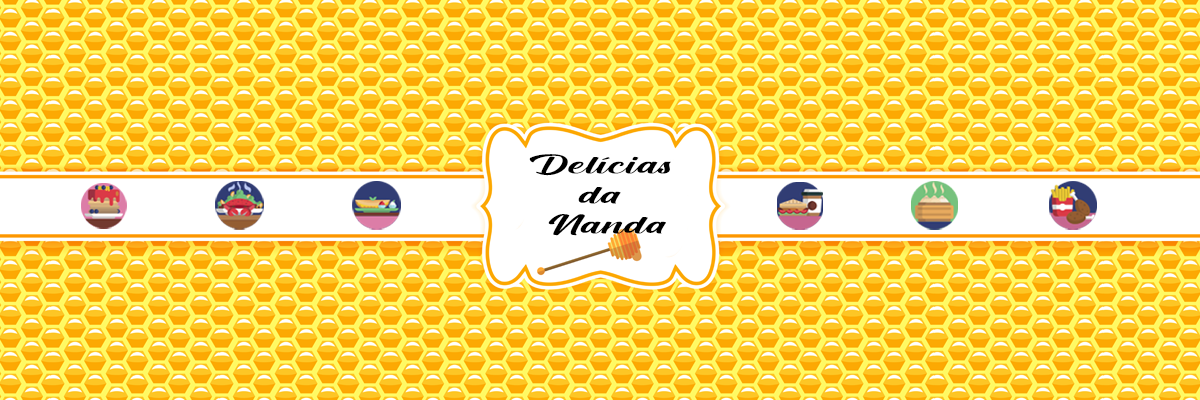
<style>
.page{position:relative;width:1200px;height:400px}
.page>*{position:absolute;margin:0}
.t1{font:33.7px/30px "CreamCake";color:#000000;scale:1.87 1}
</style>
<div class="page">
<p class="t1" style="left:529px;top:154px;width:142px;height:82px;text-align:center">Delícias <br>da <br>Nanda</p>
</div>
